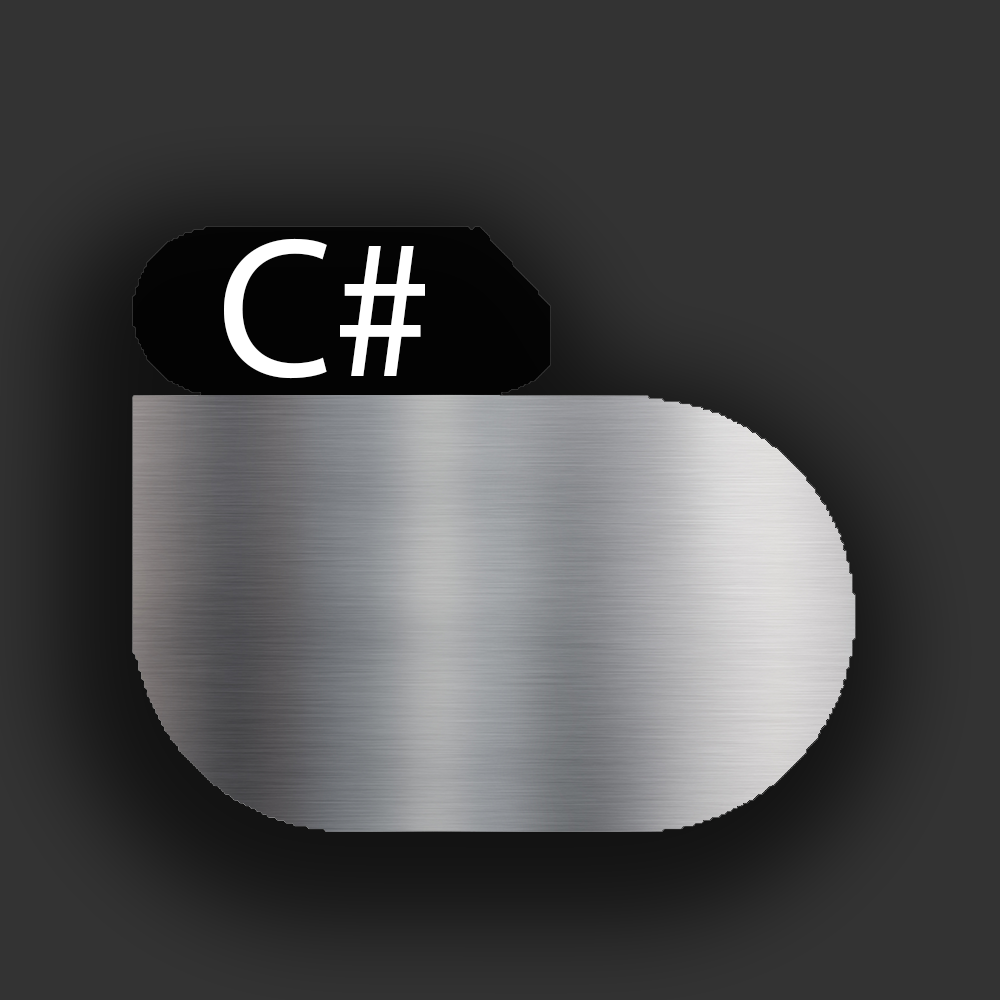
<style>
.page{position:relative;width:1000px;height:1000px;background:#333333}
.page>*{position:absolute;margin:0}
.t1{font:200.5px "MyriadPro-Regular";color:#ffffff}
</style>
<div class="page">
<p class="t1" style="left:224px;top:238px;width:201px;height:141px">C#</p>
</div>
